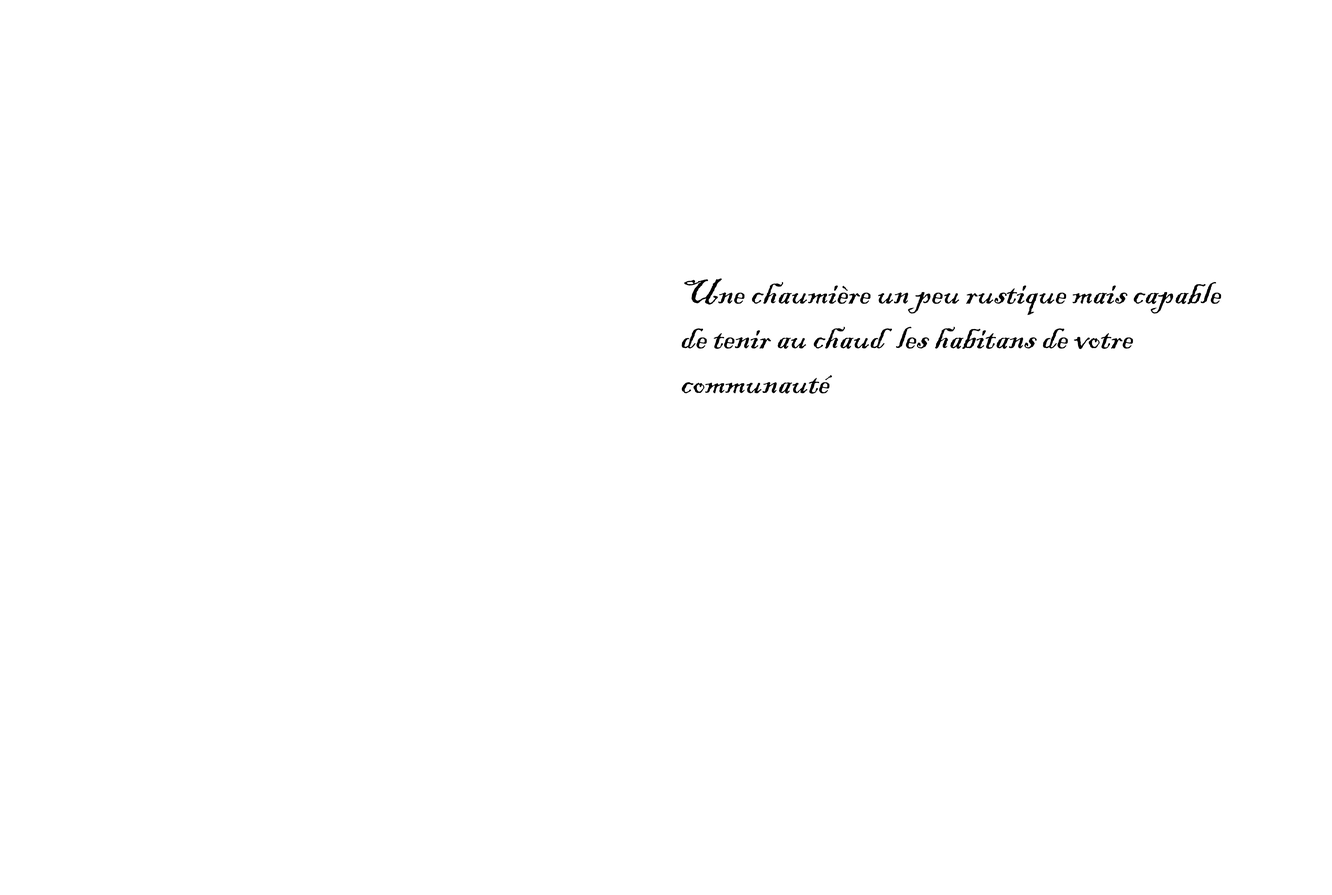
<style>
.page{position:relative;width:1332px;height:895px;background:#ffffff}
.page>*{position:absolute;margin:0}
.t1{font:37.3px "BlackadderITC-Regular";color:#000000}
</style>
<div class="page">
<p class="t1" style="left:682px;top:279px;width:539px;height:115px">Une chaumière un peu rustique mais capable <br>de tenir au chaud  les habitans de votre <br>communauté</p>
</div>
